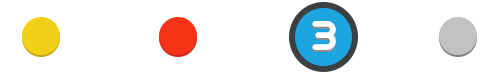
<style>
.page{position:relative;width:500px;height:75px;background:#ffffff}
.page>*{position:absolute;margin:0}
.t1{font:45.6px "GeometrySoftPro-BoldN";color:#ffffff}
</style>
<div class="page">
<p class="t1" style="left:312px;top:23px;width:24px;height:29px">3</p>
<p class="t1" style="left:312px;top:21px;width:24px;height:29px">3</p>
</div>
